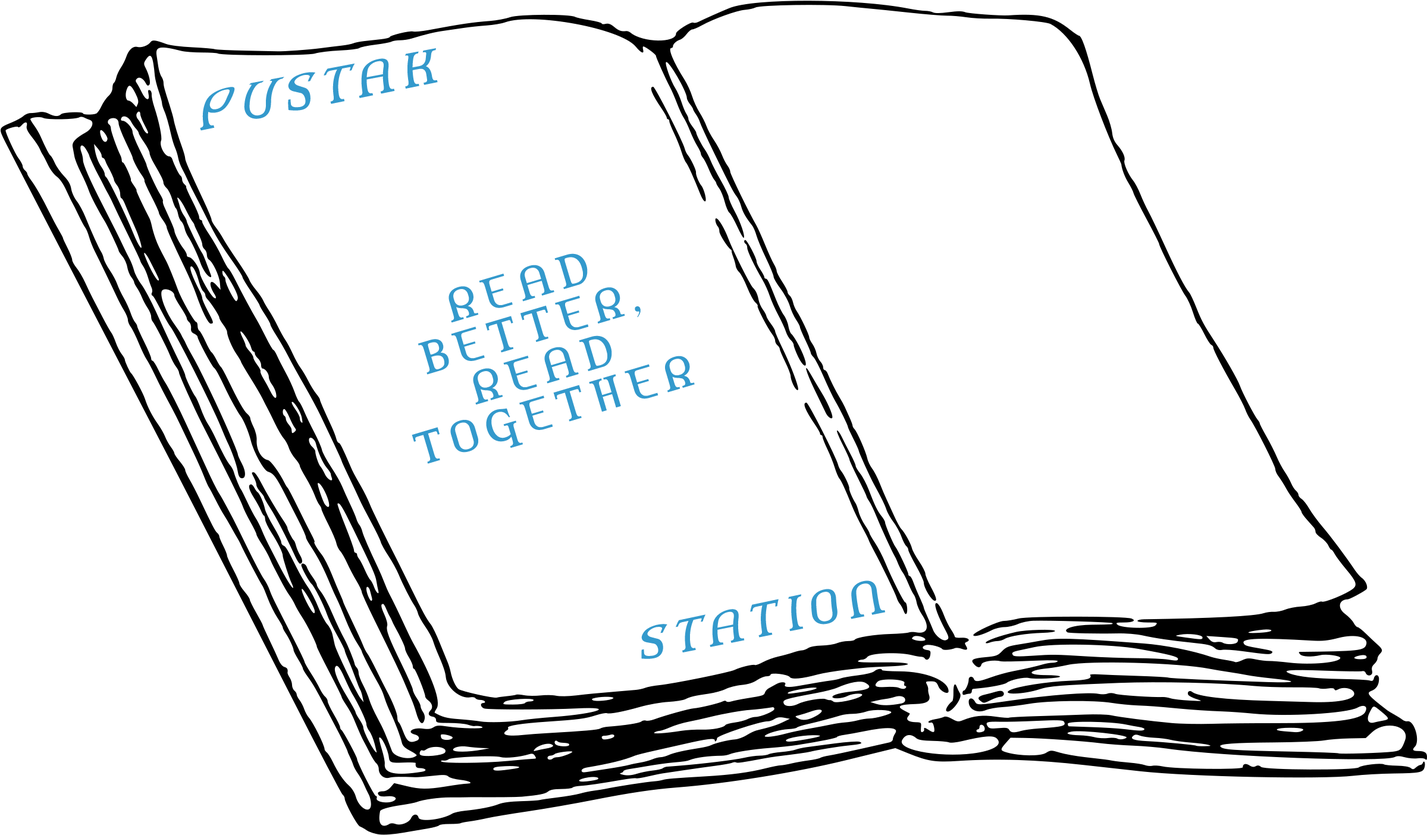
<style>
.page{position:relative;width:1427px;height:835px;background:#ffffff}
.page>*{position:absolute;margin:0}
.t1{font:42.8px "Amerika";letter-spacing:0.2em;color:#3399cc;text-transform:uppercase}
.t2{font:42.8px/42.8px "Amerika";letter-spacing:0.2em;color:#3399cc;text-transform:uppercase}
</style>
<div class="page">
<p class="t1" style="left:200px;top:48px;width:238px;height:83px;rotate:-11deg">Pustak</p>
<p class="t2" style="left:412px;top:253px;width:283px;height:211px;text-align:center;rotate:-17deg">Read <br>better,<br>read together</p>
<p class="t1" style="left:641px;top:581px;width:244px;height:78px;rotate:-11deg">station</p>
</div>
